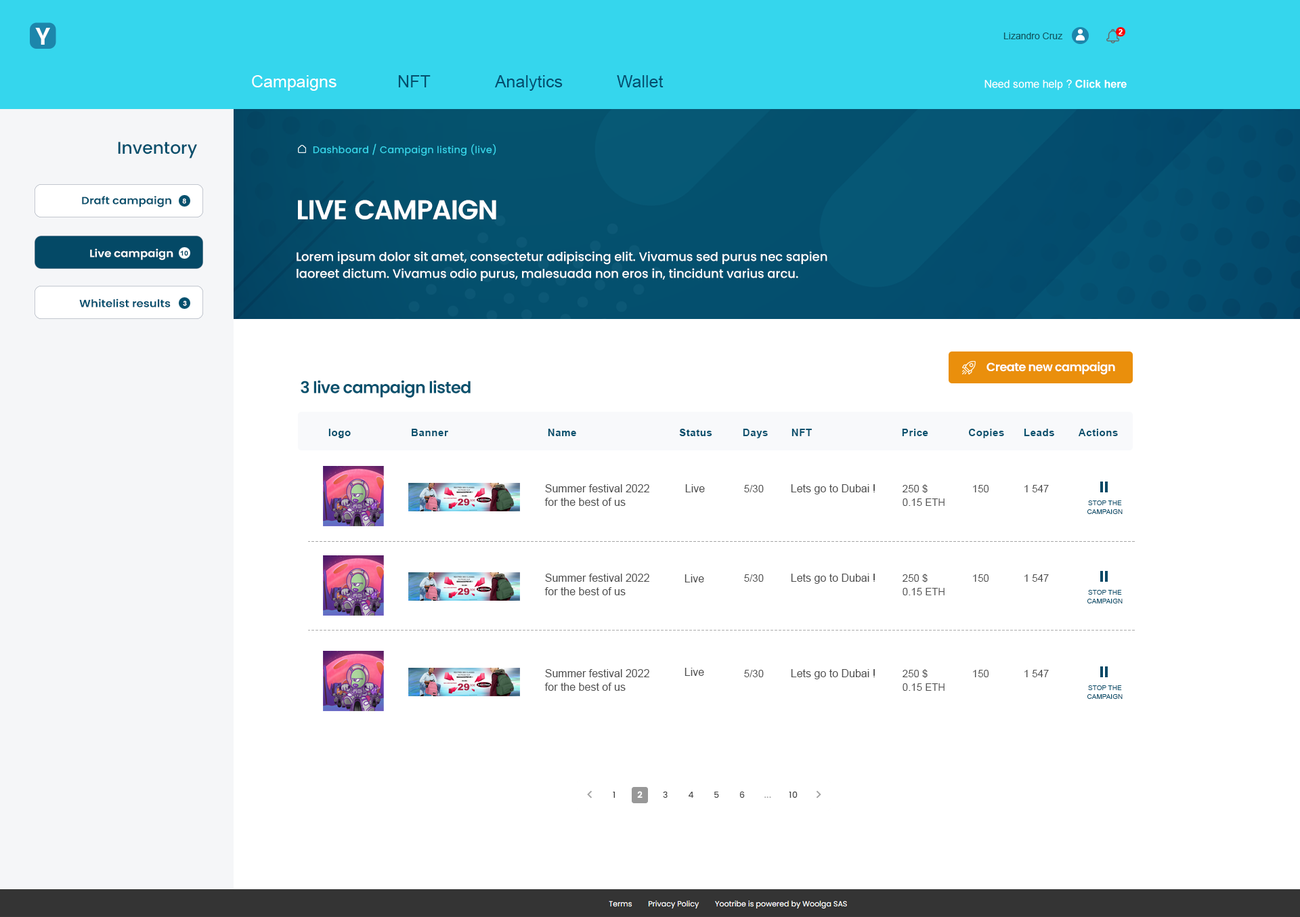
<style>
.page{position:relative;width:1300px;height:917px;background:#ffffff}
.page>*{position:absolute;margin:0}
.t1{font:23.7px "Poppins-SemiBold";color:#ffffff}
.t2{font:7.4px "Arial-BoldMT";color:#ffffff}
.t3{font:9.5px "ArialMT";color:#105761}
.t4{font:16.9px "ArialMT";color:#044d6e}
.t5{font:16.9px "ArialMT";color:#ffffff}
.t6{font:16.9px "ArialMT";color:#05506d}
.t7{font:10.8px "ArialMT";color:#ffffff}
.t8{font:10.8px "Arial-BoldMT";color:#ffffff}
.t9{font:16.9px "Poppins-Medium";color:#05506d}
.t10{font:9.5px "Poppins-Regular";letter-spacing:0.04em;color:#38d8ec}
.t11{font:10.5px "Poppins-SemiBold";color:#05506d;scale:1.07 1}
.t12{font:6.8px "Arial-BoldMT";color:#ffffff;scale:1.07 1}
.t13{font:6.8px "Poppins-SemiBold";color:#ffffff;scale:1.07 1}
.t14{font:27.1px "Poppins-SemiBold";letter-spacing:-0.03em;color:#ffffff}
.t15{font:10.5px "Poppins-SemiBold";color:#ffffff;scale:1.07 1}
.t16{font:6.8px "Arial-BoldMT";color:#044966;scale:1.07 1}
.t17{font:12.2px/16.9px "Poppins-Medium";color:#ffffff}
.t18{font:10.5px "Poppins-SemiBold";color:#044f6e;scale:1.07 1}
.t19{font:6.8px "Arial-BoldMT";color:#f8f9fb;scale:1.07 1}
.t20{font:11.9px "Poppins-SemiBold";letter-spacing:-0.03em;color:#ffffff}
.t21{font:16.3px "Poppins-SemiBold";letter-spacing:-0.03em;color:#05516d}
.t22{font:10.2px "Arial-BoldMT";letter-spacing:0.04em;color:#05506d}
.t23{font:10.8px/13.5px "ArialMT";color:#4e4e4e}
.t24{font:10.8px "ArialMT";color:#4e4e4e}
.t25{font:10.2px "ArialMT";color:#4e4e4e}
.t26{font:10.2px/13.5px "ArialMT";color:#4e4e4e}
.t27{font:6.8px/8.8px "ArialMT";color:#044e6b}
</style>
<div class="page">
<p class="t1" style="left:35px;top:28px;width:15px;height:17px">Y</p>
<p class="t2" style="left:1119px;top:29px;width:4px;height:6px">2</p>
<p class="t3" style="left:1004px;top:33px;width:59px;height:6px">Lizandro Cruz</p>
<p class="t4" style="left:252px;top:75px;width:412px;height:16px"><span class="t5">Campaigns   </span><span class="t6">NFT</span>   Analytics   Wallet</p>
<p class="t7" style="left:985px;top:79px;width:142px;height:11px">Need some help ? <span class="t8">Click here</span></p>
<p class="t9" style="left:118px;top:142px;width:79px;height:16px">Inventory</p>
<p class="t10" style="left:313px;top:144px;width:183px;height:12px">Dashboard / Campaign listing (live)</p>
<p class="t11" style="left:82px;top:196px;width:89px;height:11px">Draft campaign</p>
<p class="t12" style="left:182px;top:198px;width:4px;height:6px"><span class="t13"> </span>8</p>
<p class="t14" style="left:298px;top:200px;width:198px;height:19px">LIVE CAMPAIGN</p>
<p class="t15" style="left:90px;top:249px;width:83px;height:11px">Live campaign</p>
<p class="t16" style="left:180px;top:251px;width:8px;height:5px">10</p>
<p class="t17" style="left:297px;top:251px;width:531px;height:30px">Lorem ipsum dolor sit amet, consectetur adipiscing elit. Vivamus sed purus nec sapien laoreet dictum. Vivamus odio purus, malesuada non eros in, tincidunt varius arcu.</p>
<p class="t18" style="left:79px;top:299px;width:92px;height:8px">Whitelist results</p>
<p class="t19" style="left:183px;top:301px;width:4px;height:5px">3</p>
<p class="t20" style="left:987px;top:362px;width:128px;height:13px">Create new campaign</p>
<p class="t21" style="left:301px;top:380px;width:170px;height:18px">3 live campaign listed</p>
<p class="t22" style="left:328px;top:429px;width:790px;height:9px">logo      Banner     Name       Status  Days NFT        Price      Copies     Leads       Actions</p>
<p class="t23" style="left:545px;top:484px;width:104px;height:22px">Summer festival 2022<br>for the best of us</p>
<p class="t24" style="left:685px;top:484px;width:20px;height:8px">Live</p>
<p class="t25" style="left:744px;top:485px;width:20px;height:7px">5/30</p>
<p class="t24" style="left:791px;top:484px;width:84px;height:10px">Lets go to Dubai !</p>
<p class="t26" style="left:903px;top:484px;width:42px;height:22px">250 $<br>0.15 ETH</p>
<p class="t25" style="left:973px;top:485px;width:16px;height:7px">150</p>
<p class="t25" style="left:1025px;top:485px;width:24px;height:7px">1 547</p>
<p class="t27" style="left:1087px;top:500px;width:36px;height:14px;text-align:center">STOP THE<br>CAMPAIGN</p>
</div>
